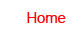
<style>
.page{position:relative;width:83px;height:40px;background:#ffffff}
.page>*{position:absolute;margin:0}
.t1{font:14.7px "ArialMT";color:#fe0000}
</style>
<div class="page">
<p class="t1" style="left:27px;top:12px;width:39px;height:11px">Home</p>
</div>
